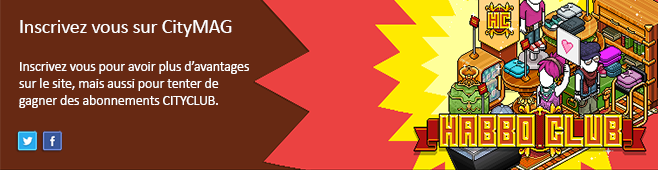
<style>
.page{position:relative;width:658px;height:170px;background:#672913}
.page>*{position:absolute;margin:0}
.t1{font:20px "Calibri";letter-spacing:-0.01em;color:#ffffff}
.t2{font:14px "Calibri";letter-spacing:-0.01em;color:#ffffff}
</style>
<div class="page">
<p class="t1" style="left:20px;top:20px;width:212px;height:17px">Inscrivez vous sur CityMAG</p>
<p class="t2" style="left:19px;top:61px;width:230px;height:47px">Inscrivez vous pour avoir plus d’avantages <br>sur le site, mais aussi pour tenter de <br>gagner des abonnements CITYCLUB.</p>
</div>
